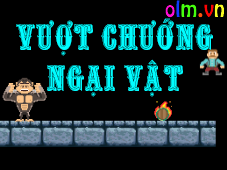
<style>
.page{position:relative;width:227px;height:170px;background:#000000}
.page>*{position:absolute;margin:0}
.t1{font:34.4px "VNI-Silver";color:#00fcff}
</style>
<div class="page">
<p class="t1" style="left:16px;top:18px;width:197px;height:79px;text-align:center">Vöôït chöôùng<br>ngaïi vaät</p>
</div>
